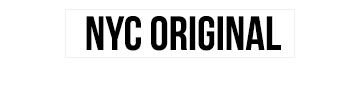
<style>
.page{position:relative;width:359px;height:85px;background:#ffffff}
.page>*{position:absolute;margin:0}
.t1{font:48px "BebasNeue";color:#000000}
</style>
<div class="page">
<p class="t1" style="left:86px;top:16px;width:195px;height:35px">NYC ORIGINAL</p>
</div>
